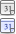
<style>
.page{position:relative;width:16px;height:34px}
.page>*{position:absolute;margin:0}
.t1{font:8px "TimesNewRomanPSMT";color:#656565}
.t2{font:8px "TimesNewRomanPSMT";color:#576299}
</style>
<div class="page">
<p class="t1" style="left:4px;top:5px;width:8px;height:7px">31</p>
<p class="t2" style="left:4px;top:23px;width:8px;height:7px">31</p>
</div>
